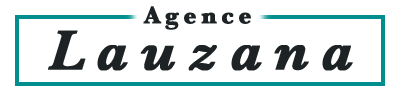
<style>
.page{position:relative;width:400px;height:100px;background:#ffffff}
.page>*{position:absolute;margin:0}
.t1{font:25px "Baskerville-Bold";letter-spacing:0.17em;color:#1d2325;font-weight:bold}
.t2{font:58.3px "Baskerville-SemiBoldItalic";letter-spacing:0.2em;color:#1d2325;font-weight:bold}
</style>
<div class="page">
<p class="t1" style="left:143px;top:6px;width:108px;height:24px">Agence</p>
<p class="t2" style="left:48px;top:30px;width:305px;height:41px">Lauzana</p>
</div>
